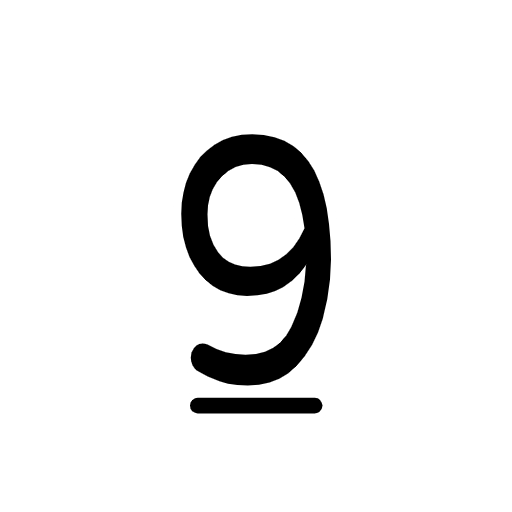
<style>
.page{position:relative;width:512px;height:512px;background:#ffffff}
.page>*{position:absolute;margin:0}
.t1{font:350px "VarelaRound-Regular";color:#000000;scale:0.82 1}
.t2{font:237px "VarelaRound-Regular";color:#000000}
</style>
<div class="page">
<p class="t1" style="left:181px;top:134px;width:150px;height:252px">9</p>
<p class="t2" style="left:189px;top:397px;width:134px;height:17px">_</p>
</div>
